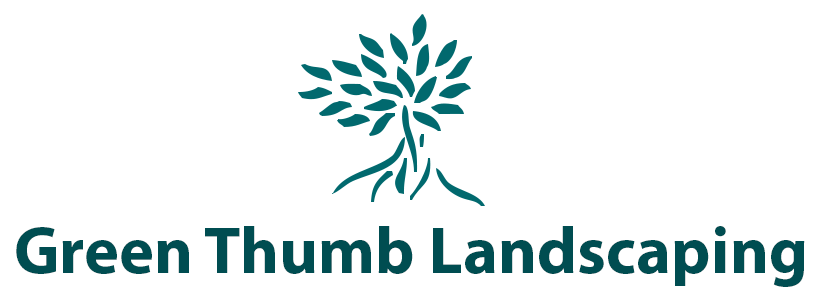
<style>
.page{position:relative;width:820px;height:305px;background:#ffffff}
.page>*{position:absolute;margin:0}
.t1{font:66.7px "MyriadPro-Bold";color:#004d51}
</style>
<div class="page">
<p class="t1" style="left:16px;top:226px;width:789px;height:61px">Green Thumb Landscaping</p>
</div>
